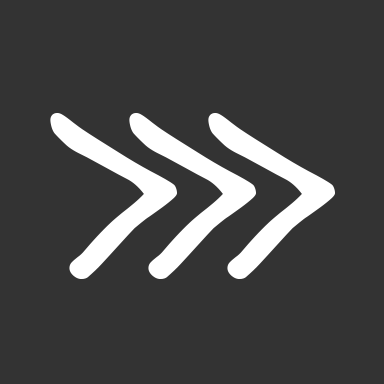
<style>
.page{position:relative;width:384px;height:384px;background:#333333}
.page>*{position:absolute;margin:0}
.t1{font:289px "SegoeScript";letter-spacing:-0.3em;color:#ffffff}
</style>
<div class="page">
<p class="t1" style="left:50px;top:113px;width:285px;height:166px">&gt;&gt;&gt;</p>
</div>
